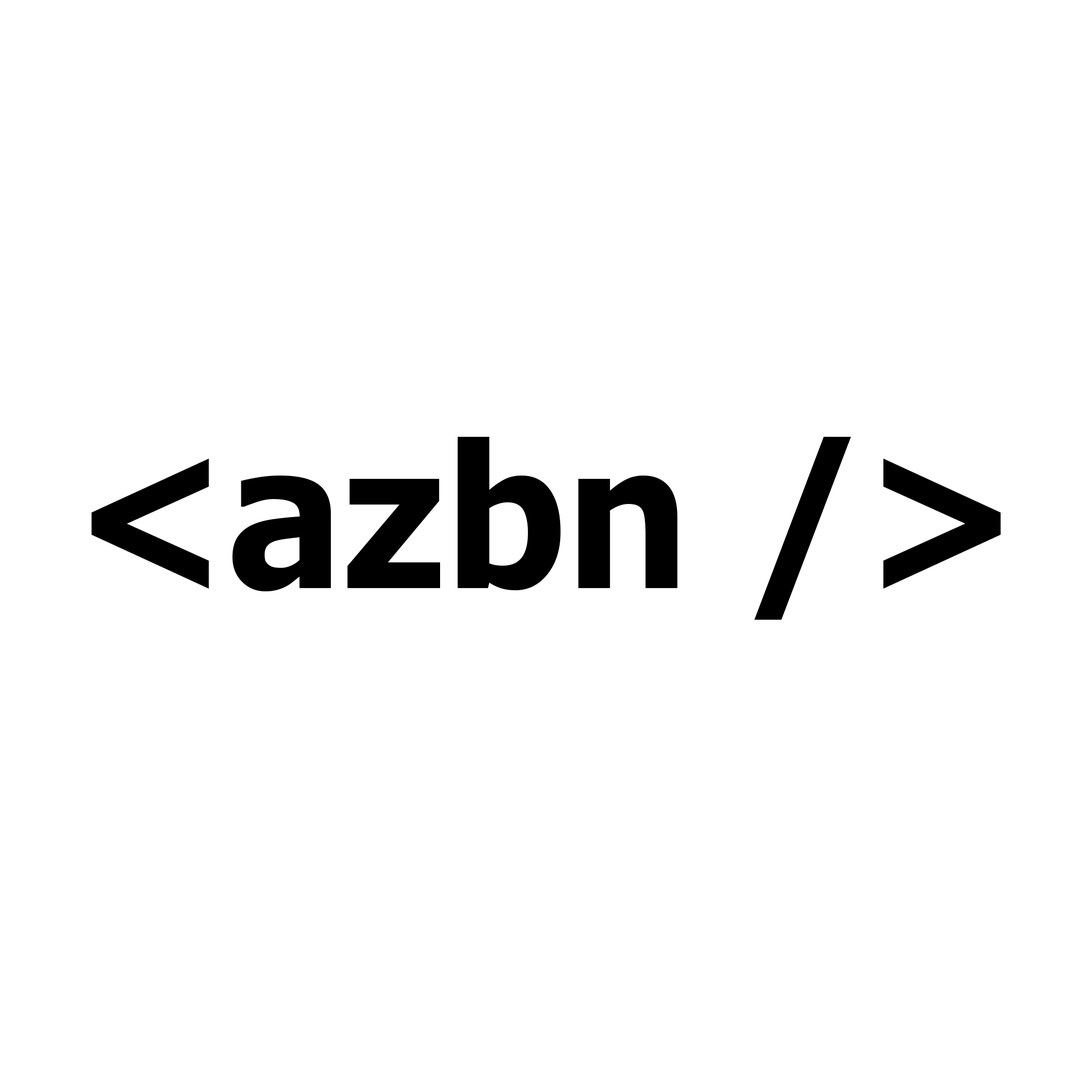
<style>
.page{position:relative;width:1092px;height:1092px;background:#ffffff}
.page>*{position:absolute;margin:0}
.t1{font:199.3px "Verdana-Bold";letter-spacing:-0.025em;color:#000000;scale:0.9 1}
</style>
<div class="page">
<p class="t1" style="left:91px;top:437px;width:910px;height:183px">&lt;azbn /&gt;</p>
</div>
